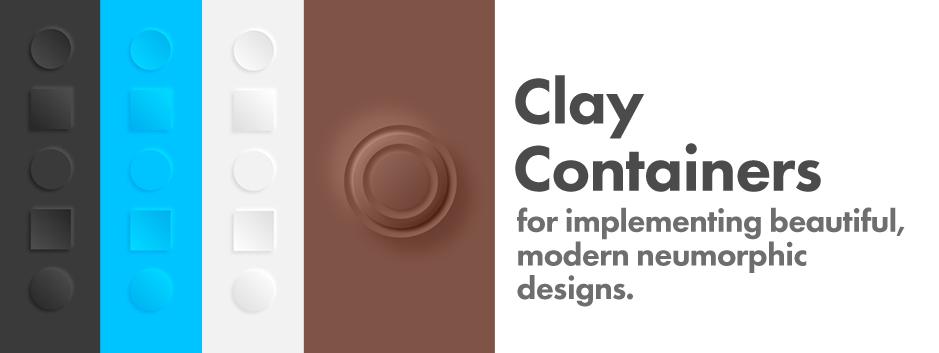
<style>
.page{position:relative;width:939px;height:353px;background:#ffffff}
.page>*{position:absolute;margin:0}
.t1{font:66.2px/67.3px "FuturaPT-Heavy";letter-spacing:-0.02em;color:#4b4b4b}
.t2{font:33px/33.7px "FuturaPT-Heavy";letter-spacing:-0.02em;color:#6e6e6e}
</style>
<div class="page">
<p class="t1" style="left:515px;top:75px;width:306px;height:117px">Clay<br>Containers</p>
<p class="t2" style="left:517px;top:207px;width:388px;height:100px">for implementing beautiful,<br>modern neumorphic<br>designs.</p>
</div>
